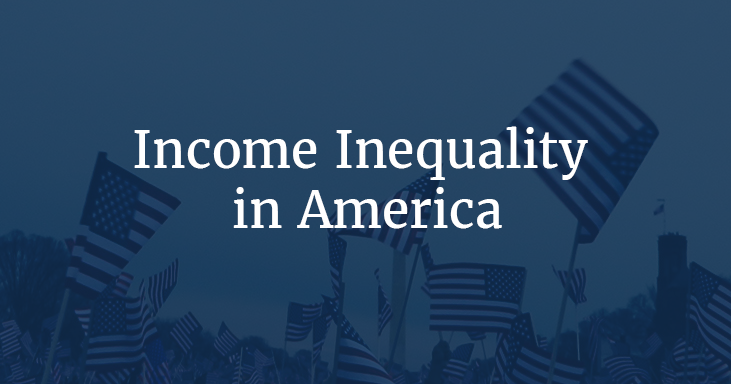
<style>
.page{position:relative;width:731px;height:384px}
.page>*{position:absolute;margin:0}
.t1{font:12px "Merriweather-Regular";color:#ffffff}
</style>
<div class="page">
<p class="t1" style="left:134px;top:126px;width:454px;height:103px;text-align:center">Income Inequality <br>in America</p>
</div>
